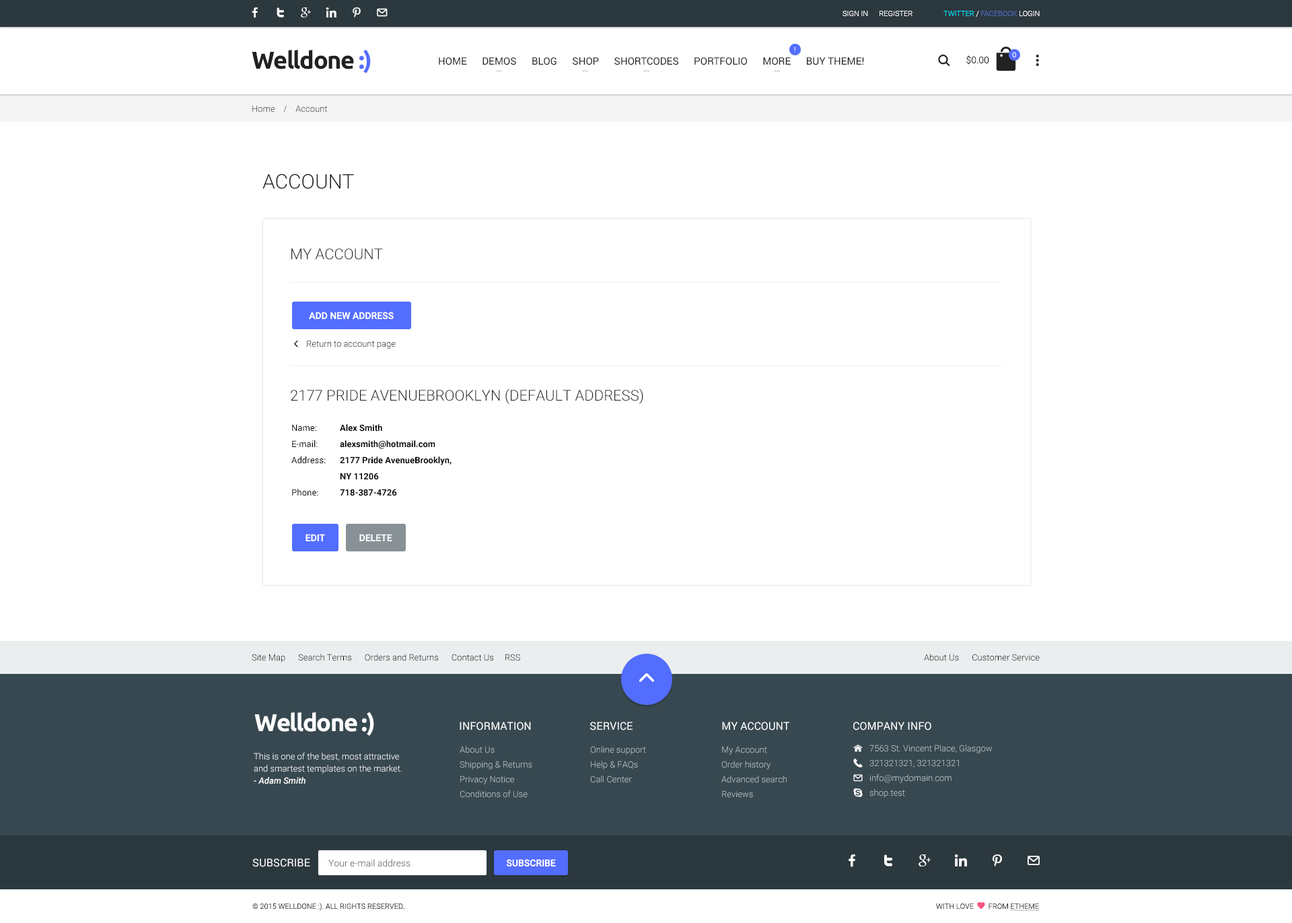
<style>
.page{position:relative;width:1292px;height:923px;background:#ffffff}
.page>*{position:absolute;margin:0}
.t1{font:7.4px "Roboto-Light";color:#ffffff}
.t2{font:7.4px "Roboto-Light";color:#526ac4}
.t3{font:7.4px "Roboto-Light";color:#00e4ff}
.t4{font:24.2px "Ubuntu-Bold";letter-spacing:-0.04em;color:#212121}
.t5{font:24.2px "Ubuntu-Bold";letter-spacing:-0.04em;color:#536dfe}
.t6{font:6.7px "Roboto-Regular"}
.t7{font:10.1px "Roboto-Regular";color:#212121}
.t8{font:9.4px "Roboto-Light";color:#212121}
.t9{font:8.7px "Roboto-Light"}
.t10{font:20.2px "Roboto-Light";color:#212121;text-transform:uppercase}
.t11{font:14.8px "Roboto-Light";color:#212121;text-transform:uppercase}
.t12{font:9.4px "Roboto-Medium";color:#ffffff;text-transform:uppercase}
.t13{font:8.7px/16.2px "Roboto-Bold";color:#000000}
.t14{font:8.7px/16.2px "Roboto-Regular";color:#000000}
.t15{font:8.7px "Roboto-Light";color:#000000}
.t16{font:24.2px "Ubuntu-Bold";letter-spacing:-0.04em;color:#ffffff}
.t17{font:10.8px "Roboto-Regular";color:#ffffff;text-transform:uppercase}
.t18{font:8.7px/14.8px "Roboto-Light";color:#bbc2c6}
.t19{font:8.7px/12.1px "Roboto-Light";color:#ffffff}
.t20{font:8.7px/12.1px "Roboto-MediumItalic";color:#ffffff}
.t21{font:9.4px "Roboto-Light";color:#848484}
.t22{font:7.4px "Roboto-Light";color:#2b2b2b;text-transform:uppercase}
</style>
<div class="page">
<p class="t1" style="left:843px;top:11px;width:70px;height:5px">SIGN IN      REGISTER</p>
<p class="t2" style="left:944px;top:11px;width:96px;height:6px"><span class="t3">TWITTER </span><span class="t1">/ </span>FACEBOOK <span class="t1">LOGIN</span></p>
<p class="t4" style="left:252px;top:49px;width:119px;height:24px">Welldone <span class="t5">:)</span></p>
<p class="t6" style="left:794px;top:46px;width:2px;height:6px">!</p>
<p class="t1" style="left:1012px;top:52px;width:4px;height:6px">0</p>
<p class="t7" style="left:439px;top:57px;width:425px;height:8px">HOME      DEMOS      BLOG      SHOP      SHORTCODES      PORTFOLIO      MORE      BUY THEME!</p>
<p class="t8" style="left:967px;top:55px;width:22px;height:10px">$0.00</p>
<p class="t9" style="left:252px;top:105px;width:75px;height:7px">Home    /    Account</p>
<p class="t10" style="left:262px;top:174px;width:92px;height:15px">Account</p>
<p class="t11" style="left:291px;top:248px;width:92px;height:12px">MY ACCOUNT</p>
<p class="t12" style="left:309px;top:312px;width:85px;height:7px">ADD NEW AddresS</p>
<p class="t9" style="left:307px;top:340px;width:89px;height:9px">Return to account page</p>
<p class="t11" style="left:291px;top:388px;width:352px;height:16px">2177 Pride AvenueBrooklyn (DEFAULT ADDRESS)</p>
<p class="t13" style="left:291px;top:424px;width:161px;height:72px"><span class="t14">Name: </span>Alex Smith<br><span class="t14">E-mail: </span>alexsmith@hotmail.com<br><span class="t14">Address: </span>2177 Pride AvenueBrooklyn, <br>  NY 11206<br><span class="t14">Phone:</span> 718-387-4726</p>
<p class="t12" style="left:306px;top:534px;width:19px;height:7px">Edit</p>
<p class="t12" style="left:359px;top:534px;width:33px;height:7px">Delete</p>
<p class="t15" style="left:252px;top:654px;width:268px;height:8px">Site Map      Search Terms      Orders and Returns      Contact Us     RSS</p>
<p class="t15" style="left:924px;top:654px;width:116px;height:7px">About Us      Customer Service</p>
<p class="t16" style="left:254px;top:711px;width:120px;height:25px">Welldone :)</p>
<p class="t17" style="left:460px;top:722px;width:71px;height:8px">Information</p>
<p class="t17" style="left:590px;top:722px;width:43px;height:8px">service</p>
<p class="t17" style="left:722px;top:722px;width:67px;height:8px">My account</p>
<p class="t17" style="left:853px;top:722px;width:79px;height:8px">Company Info</p>
<p class="t18" style="left:460px;top:746px;width:72px;height:52px">About Us<br>Shipping &amp; Returns<br>Privacy Notice<br>Conditions of Use</p>
<p class="t18" style="left:590px;top:746px;width:56px;height:37px">Online support<br>Help &amp; FAQs<br>Call Center</p>
<p class="t18" style="left:722px;top:746px;width:65px;height:52px">My Account<br>Order history<br>Advanced search<br>Reviews</p>
<p class="t18" style="left:870px;top:744px;width:122px;height:54px">7563 St. Vincent Place, Glasgow<br>321321321, 321321321<br>info@mydomain.com<br>shop.test</p>
<p class="t19" style="left:254px;top:752px;width:148px;height:32px">This is one of the best, most attractive and smartest templates on the market. <br><span class="t20">- Adam Smith</span></p>
<p class="t17" style="left:252px;top:858px;width:58px;height:9px">Subscribe</p>
<p class="t21" style="left:328px;top:859px;width:83px;height:8px">Your e-mail address</p>
<p class="t12" style="left:506px;top:859px;width:50px;height:7px">SUBSCRIBE</p>
<p class="t22" style="left:252px;top:903px;width:153px;height:8px">© 2015 Welldone :). All Rights Reserved.</p>
</div>
